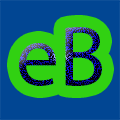
<style>
.page{position:relative;width:120px;height:120px;background:#014693}
.page>*{position:absolute;margin:0}
.t1{font:85.5px "MyriadPro-Regular"}
</style>
<div class="page">
<p class="t1" style="left:19px;top:27px;width:83px;height:59px">eB</p>
</div>
